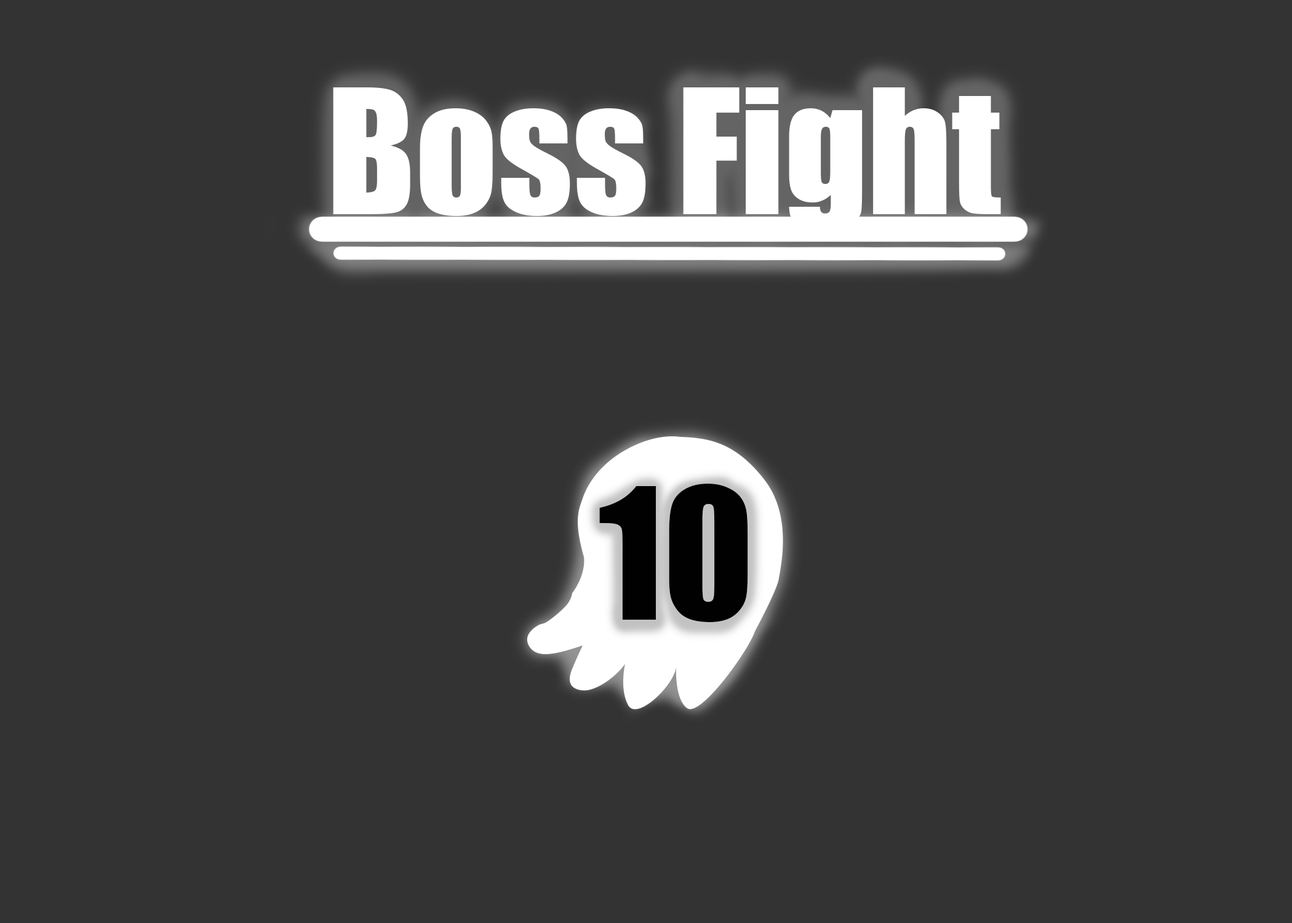
<style>
.page{position:relative;width:1292px;height:923px;background:#333333}
.page>*{position:absolute;margin:0}
.t1{font:160.5px "Impact";color:#ffffff}
.t2{font:168.7px "Impact";color:#010101}
</style>
<div class="page">
<p class="t1" style="left:333px;top:87px;width:668px;height:145px">Boss Fight</p>
<p class="t2" style="left:599px;top:484px;width:149px;height:138px">10</p>
</div>
